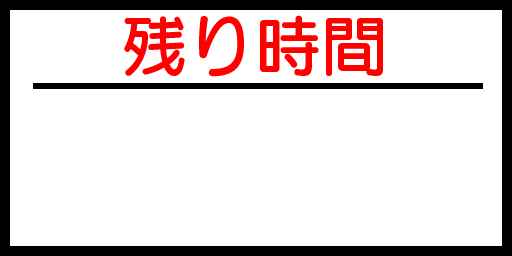
<style>
.page{position:relative;width:512px;height:256px;background:#ffffff}
.page>*{position:absolute;margin:0}
.t1{font:66.7px "SeuratProN-DB";color:#ff0000}
</style>
<div class="page">
<p class="t1" style="left:124px;top:15px;width:259px;height:62px">残り時間</p>
</div>
